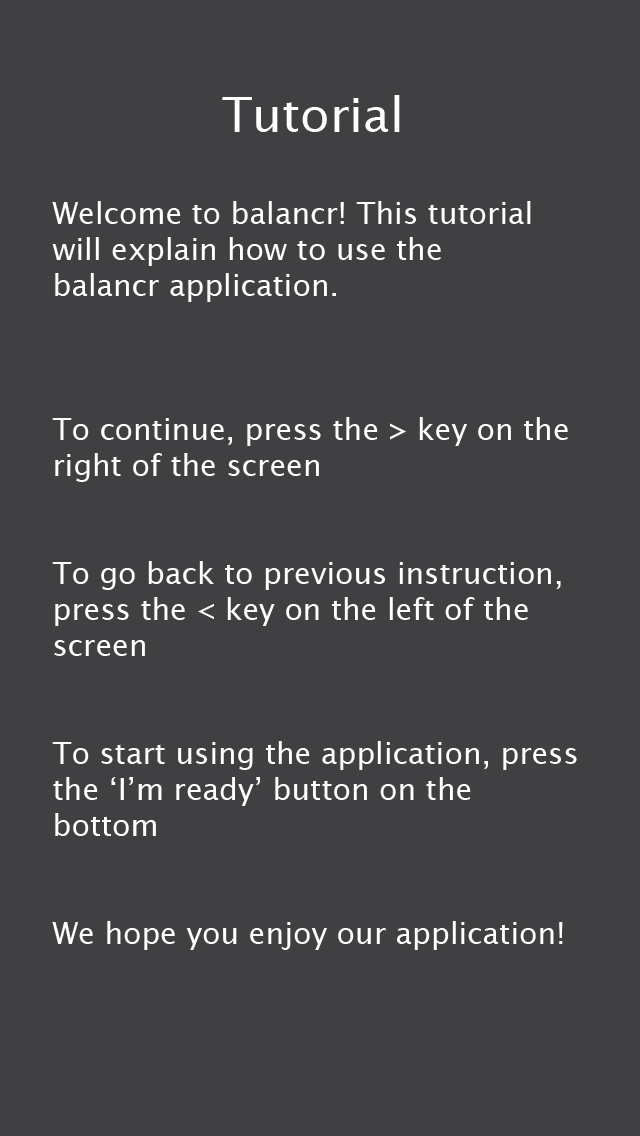
<style>
.page{position:relative;width:640px;height:1136px;background:#403f41}
.page>*{position:absolute;margin:0}
.t1{font:48px "LucidaSans";color:#ffffff}
.t2{font:30px "LucidaSans";color:#ffffff}
</style>
<div class="page">
<p class="t1" style="left:222px;top:95px;width:178px;height:37px">Tutorial</p>
<p class="t2" style="left:52px;top:201px;width:525px;height:749px">Welcome to balancr! This tutorial<br>will explain how to use the<br>balancr application.<br><br><br><br>To continue, press the &gt; key on the<br>right of the screen<br><br><br>To go back to previous instruction,<br>press the &lt; key on the left of the<br>screen<br><br><br>To start using the application, press<br>the ‘I’m ready’ button on the<br>bottom<br><br><br>We hope you enjoy our application!</p>
</div>
